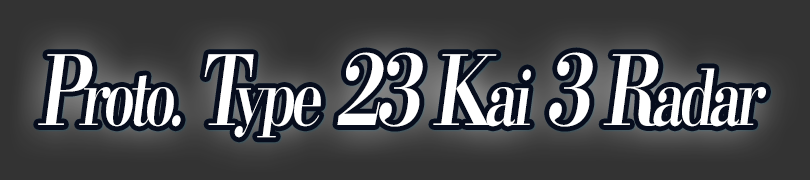
<style>
.page{position:relative;width:810px;height:180px;background:#333333}
.page>*{position:absolute;margin:0}
.t1{font:76.8px "KochoStd-Heavy";letter-spacing:-0.08em;color:#ffffff;font-style:italic;scale:0.75 1}
.t2{font:96px "KochoStd-Heavy";letter-spacing:-0.08em;color:#ffffff;font-style:italic;scale:0.75 1}
</style>
<div class="page">
<p class="t1" style="left:38px;top:52px;width:728px;height:86px"><span class="t2">P</span>roto.<span class="t2"> T</span>ype<span class="t2"> 23 K</span>ai<span class="t2"> 3 R</span>adar</p>
</div>
